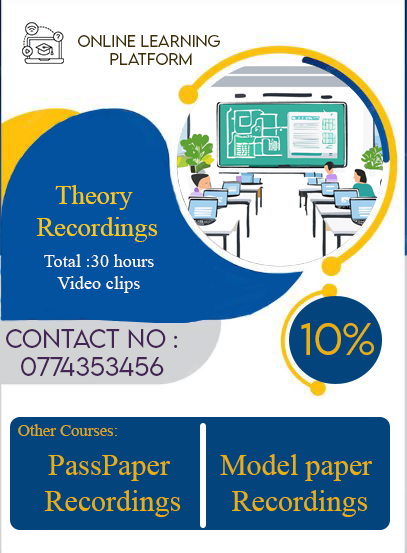
<style>
.page{position:relative;width:407px;height:553px;background:#ffffff}
.page>*{position:absolute;margin:0}
.t1{font:15px "LEMONMILK-Light";color:#3e2f03}
.t2{font:26.7px "TimesNewRomanPSMT";color:#fcc80a}
.t3{font:18.3px "TimesNewRomanPSMT";color:#fdf9f9}
.t4{font:23.3px "LEMONMILK-Light";color:#432455}
.t5{font:40px "LEMONMILK-Light";color:#e9af0c}
.t6{font:16.7px "TimesNewRomanPSMT";color:#dfa916}
.t7{font:30px "TimesNewRomanPSMT";color:#e9af0c}
</style>
<div class="page">
<p class="t1" style="left:78px;top:34px;width:142px;height:31px;text-align:center">Online Learning <br>Platform</p>
<p class="t2" style="left:36px;top:185px;width:122px;height:57px;text-align:center">Theory <br>Recordings</p>
<p class="t3" style="left:44px;top:254px;width:110px;height:39px;text-align:center">Total :30 hours<br>Video clips</p>
<p class="t4" style="left:6px;top:329px;width:172px;height:47px;text-align:center">Contact no :<br>0774353456</p>
<p class="t5" style="left:301px;top:323px;width:73px;height:32px">10%</p>
<p class="t6" style="left:18px;top:424px;width:99px;height:12px">Other Courses:</p>
<p class="t7" style="left:45px;top:455px;width:136px;height:62px;text-align:center">PassPaper <br>Recordings</p>
<p class="t7" style="left:220px;top:454px;width:152px;height:63px;text-align:center">Model paper <br>Recordings</p>
</div>
